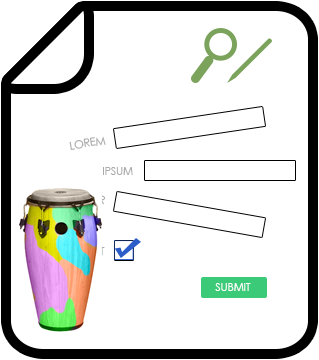
<style>
.page{position:relative;width:319px;height:360px;background:#ffffff}
.page>*{position:absolute;margin:0}
.t1{font:11px "CenturyGothic";letter-spacing:-0.02em;color:#aaaaaa}
.t2{font:11px "CenturyGothic";letter-spacing:-0.02em;color:#ffffff}
</style>
<div class="page">
<p class="t1" style="left:69px;top:136px;width:37px;height:14px;rotate:-8deg">LOREM</p>
<p class="t1" style="left:103px;top:167px;width:30px;height:8px">IPSUM</p>
<p class="t2" style="left:215px;top:283px;width:36px;height:8px">SUBMIT</p>
</div>
